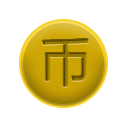
<style>
.page{position:relative;width:128px;height:128px;background:#ffffff}
.page>*{position:absolute;margin:0}
.t1{font:52px "MicrosoftYaHei";color:#977902}
</style>
<div class="page">
<p class="t1" style="left:42px;top:39px;width:46px;height:48px">币</p>
</div>
